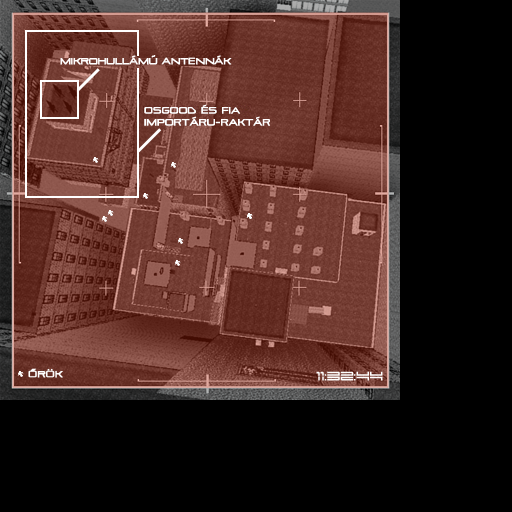
<style>
.page{position:relative;width:512px;height:512px;background:#000000}
.page>*{position:absolute;margin:0}
.t1{font:9px "Pirulen";color:#ffffff;font-weight:bold;scale:0.95 1}
.t2{font:8.5px "Pirulen";color:#ffffff;font-weight:bold}
.t3{font:9px "Pirulen";color:#ffffff;font-weight:bold;scale:0.97 1}
</style>
<div class="page">
<p class="t1" style="left:60px;top:55px;width:172px;height:10px">MIKROHULLÁMÚ ANTENNÁK</p>
<p class="t1" style="left:144px;top:104px;width:97px;height:10px">OSGOOD ÉS Fi<span class="t2">a</span></p>
<p class="t1" style="left:144px;top:116px;width:126px;height:10px">IMPORTÁRU-RAKTÁR</p>
<p class="t3" style="left:28px;top:368px;width:35px;height:10px">ŐRÖK</p>
</div>
